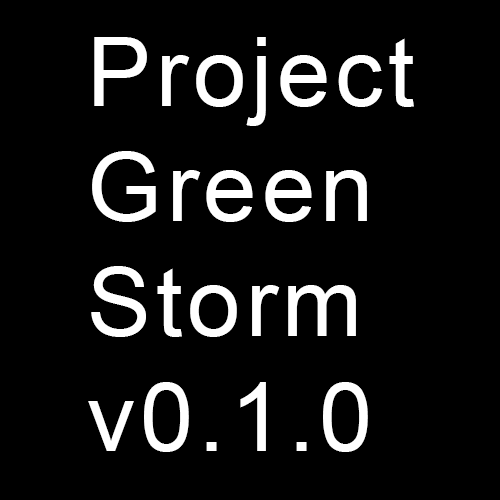
<style>
.page{position:relative;width:500px;height:500px;background:#000000}
.page>*{position:absolute;margin:0}
.t1{font:96px "ArialMT";letter-spacing:0.05em;color:#ffffff}
</style>
<div class="page">
<p class="t1" style="left:88px;top:37px;width:326px;height:415px">Project<br>Green<br>Storm<br>v0.1.0</p>
</div>
